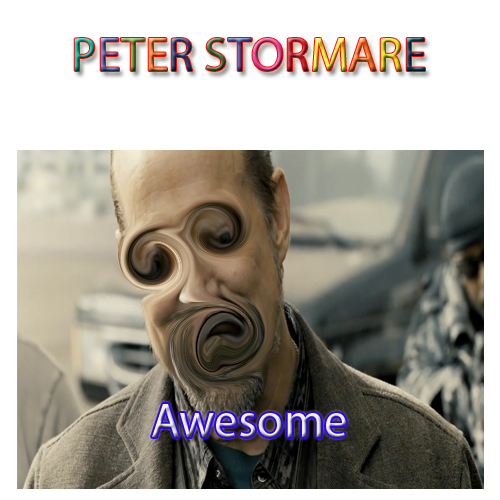
<style>
.page{position:relative;width:500px;height:500px;background:#ffffff}
.page>*{position:absolute;margin:0}
.t1{font:48px "MyriadPro-Regular"}
</style>
<div class="page">
<p class="t1" style="left:74px;top:38px;width:351px;height:33px">PETER STORMARE</p>
<p class="t1" style="left:152px;top:404px;width:194px;height:33px">Awesome</p>
</div>
